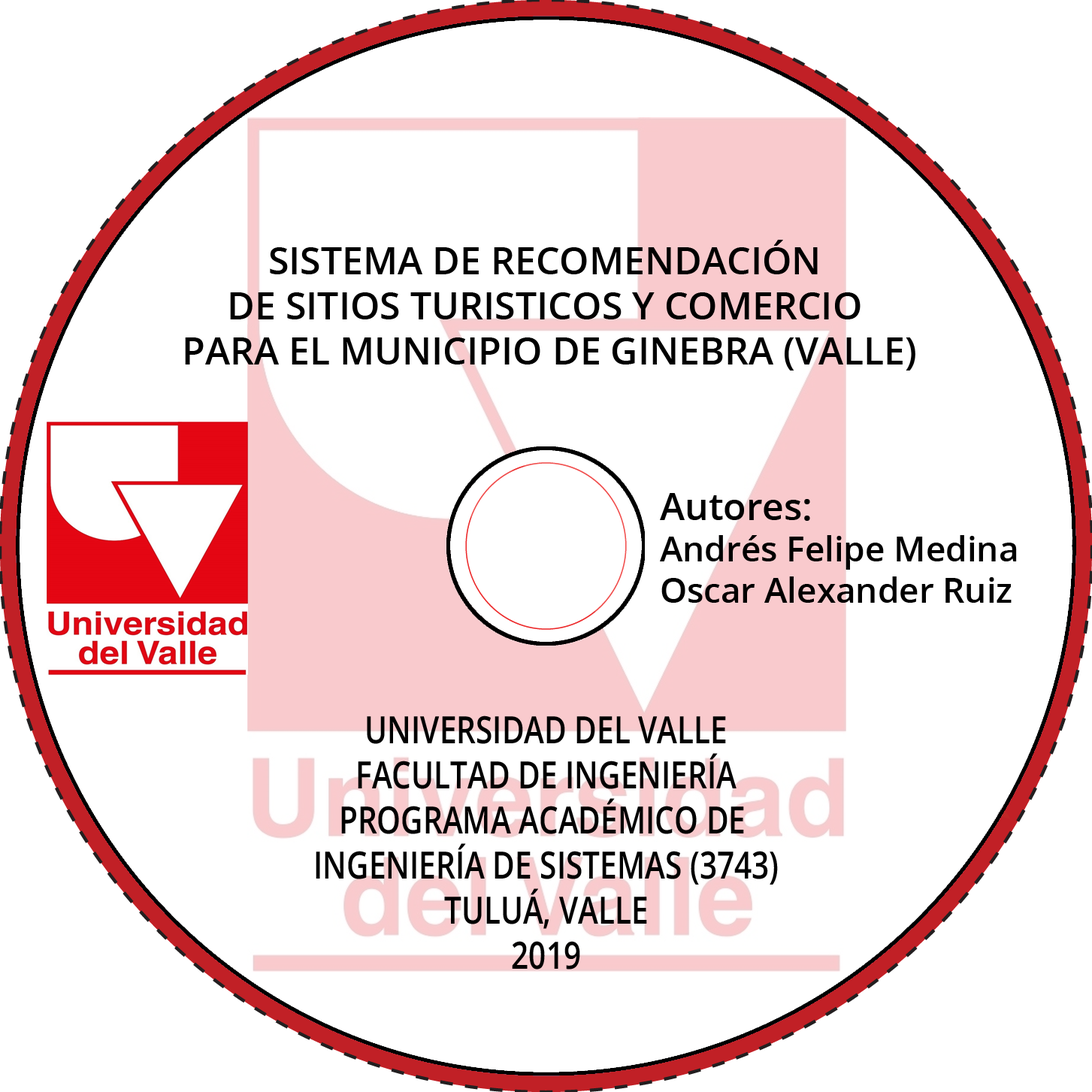
<style>
.page{position:relative;width:1092px;height:1092px;background:#ffffff}
.page>*{position:absolute;margin:0}
.t1{font:37.6px "OpenSans-Semibold";color:#000000}
.t2{font:34.4px "OpenSans-Semibold";color:#000000}
.t3{font:9px "OpenSans-Semibold";color:#000000}
.t4{font:37.6px "OpenSans-Semibold";color:#000000;scale:0.81 1}
</style>
<div class="page">
<p class="t1" style="left:185px;top:240px;width:730px;height:131px;text-align:center">SISTEMA DE RECOMENDACIÓN <br>DE SITIOS TURISTICOS Y COMERCIO <br>PARA EL MUNICIPIO DE GINEBRA (VALLE)</p>
<p class="t2" style="left:660px;top:493px;width:357px;height:110px"><span class="t3">Autores:<br></span>Andrés Felipe Medina<br>Oscar Alexander Ruiz</p>
<p class="t4" style="left:316px;top:715px;width:462px;height:254px;text-align:center">UNIVERSIDAD DEL VALLE<br>FACULTAD DE INGENIERÍA<br>PROGRAMA ACADÉMICO DE <br>INGENIERÍA DE SISTEMAS (3743)<br>TULUÁ, VALLE<br>2019</p>
</div>
